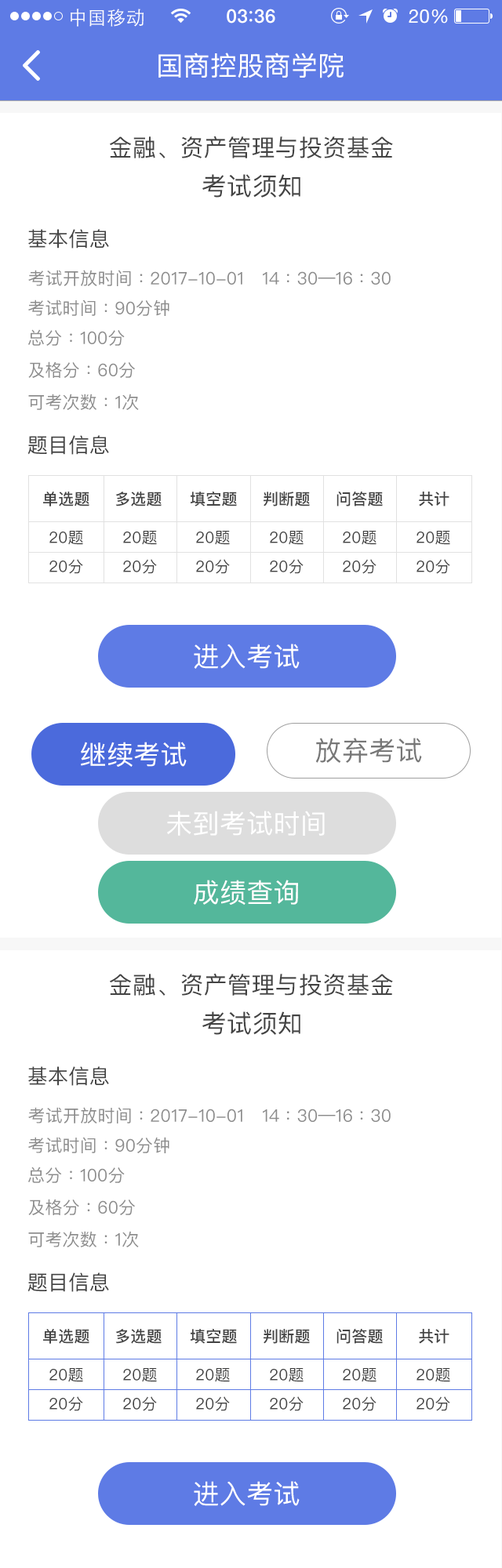
<style>
.page{position:relative;width:502px;height:1568px;background:#ffffff}
.page>*{position:absolute;margin:0}
.t1{font:18.8px "STHeitiSC-Light";letter-spacing:0.02em;color:#ffffff}
.t2{font:18.8px "HelveticaNeue-Medium";letter-spacing:0.03em;color:#ffffff}
.t3{font:18.8px "HelveticaNeue";letter-spacing:0.02em;color:#ffffff}
.t4{font:26.7px "PingFangSC-Regular";letter-spacing:0.01em;color:#ffffff}
.t5{font:23.5px "PingFangSC-Regular";letter-spacing:0.01em;color:#434343}
.t6{font:25.1px "PingFangSC-Regular";letter-spacing:0.01em;color:#434343}
.t7{font:20.4px "PingFangSC-Regular";letter-spacing:0.01em;color:#434343}
.t8{font:17.2px "PingFangSC-Regular";letter-spacing:0.01em;color:#8c8c8c}
.t9{font:15.7px "PingFangSC-Medium";letter-spacing:0.01em;color:#434343}
.t10{font:15.7px "PingFangSC-Regular";letter-spacing:0.01em;color:#434343}
.t11{font:26.7px "PingFangSC-Regular";letter-spacing:0.01em;color:#777777}
</style>
<div class="page">
<p class="t1" style="left:71px;top:9px;width:72px;height:18px">中国移动</p>
<p class="t2" style="left:227px;top:9px;width:48px;height:15px">03 36</p>
<p class="t3" style="left:408px;top:9px;width:40px;height:15px">20%</p>
<p class="t4" style="left:158px;top:53px;width:185px;height:25px">国商控股商学院</p>
<p class="t5" style="left:110px;top:136px;width:283px;height:22px">金融、资产管理与投资基金</p>
<p class="t6" style="left:202px;top:174px;width:98px;height:24px">考试须知</p>
<p class="t7" style="left:28px;top:229px;width:81px;height:20px">基本信息</p>
<p class="t8" style="left:28px;top:270px;width:362px;height:16px">考试开放时间：2017-10-01   14：30—16：30</p>
<p class="t8" style="left:28px;top:299px;width:141px;height:17px">考试时间：90分钟</p>
<p class="t8" style="left:28px;top:329px;width:97px;height:17px">总分：100分</p>
<p class="t8" style="left:28px;top:361px;width:107px;height:17px">及格分：60分</p>
<p class="t8" style="left:28px;top:394px;width:111px;height:16px">可考次数：1次</p>
<p class="t7" style="left:27px;top:435px;width:82px;height:20px">题目信息</p>
<p class="t9" style="left:43px;top:492px;width:46px;height:14px">单选题</p>
<p class="t9" style="left:115px;top:492px;width:47px;height:14px">多选题</p>
<p class="t9" style="left:190px;top:492px;width:47px;height:14px">填空题</p>
<p class="t9" style="left:263px;top:492px;width:47px;height:14px">判断题</p>
<p class="t9" style="left:336px;top:492px;width:47px;height:14px">问答题</p>
<p class="t9" style="left:419px;top:492px;width:30px;height:14px">共计</p>
<p class="t10" style="left:49px;top:531px;width:34px;height:14px">20题</p>
<p class="t10" style="left:123px;top:531px;width:34px;height:14px">20题</p>
<p class="t10" style="left:196px;top:531px;width:34px;height:14px">20题</p>
<p class="t10" style="left:270px;top:531px;width:33px;height:14px">20题</p>
<p class="t10" style="left:343px;top:531px;width:33px;height:14px">20题</p>
<p class="t10" style="left:416px;top:531px;width:34px;height:14px">20题</p>
<p class="t10" style="left:49px;top:559px;width:34px;height:15px">20分</p>
<p class="t10" style="left:123px;top:559px;width:34px;height:15px">20分</p>
<p class="t10" style="left:196px;top:559px;width:34px;height:15px">20分</p>
<p class="t10" style="left:270px;top:559px;width:33px;height:15px">20分</p>
<p class="t10" style="left:343px;top:559px;width:33px;height:15px">20分</p>
<p class="t10" style="left:416px;top:559px;width:34px;height:15px">20分</p>
<p class="t4" style="left:194px;top:644px;width:105px;height:25px">进入考试</p>
<p class="t11" style="left:315px;top:738px;width:107px;height:25px">放弃考试</p>
<p class="t4" style="left:81px;top:742px;width:106px;height:25px">继续考试</p>
<p class="t4" style="left:167px;top:811px;width:158px;height:25px">未到考试时间</p>
<p class="t4" style="left:194px;top:880px;width:104px;height:25px">成绩查询</p>
<p class="t5" style="left:110px;top:973px;width:283px;height:23px">金融、资产管理与投资基金</p>
<p class="t6" style="left:202px;top:1011px;width:98px;height:24px">考试须知</p>
<p class="t7" style="left:28px;top:1066px;width:81px;height:20px">基本信息</p>
<p class="t8" style="left:28px;top:1107px;width:362px;height:16px">考试开放时间：2017-10-01   14：30—16：30</p>
<p class="t8" style="left:28px;top:1137px;width:141px;height:16px">考试时间：90分钟</p>
<p class="t8" style="left:28px;top:1167px;width:97px;height:16px">总分：100分</p>
<p class="t8" style="left:28px;top:1199px;width:107px;height:16px">及格分：60分</p>
<p class="t8" style="left:28px;top:1231px;width:111px;height:16px">可考次数：1次</p>
<p class="t7" style="left:27px;top:1272px;width:82px;height:20px">题目信息</p>
<p class="t9" style="left:43px;top:1329px;width:46px;height:15px">单选题</p>
<p class="t9" style="left:115px;top:1329px;width:47px;height:15px">多选题</p>
<p class="t9" style="left:190px;top:1329px;width:47px;height:15px">填空题</p>
<p class="t9" style="left:263px;top:1329px;width:47px;height:15px">判断题</p>
<p class="t9" style="left:336px;top:1329px;width:47px;height:15px">问答题</p>
<p class="t9" style="left:419px;top:1329px;width:30px;height:15px">共计</p>
<p class="t10" style="left:49px;top:1368px;width:34px;height:14px">20题</p>
<p class="t10" style="left:123px;top:1368px;width:34px;height:14px">20题</p>
<p class="t10" style="left:196px;top:1368px;width:34px;height:14px">20题</p>
<p class="t10" style="left:270px;top:1368px;width:33px;height:14px">20题</p>
<p class="t10" style="left:343px;top:1368px;width:33px;height:14px">20题</p>
<p class="t10" style="left:416px;top:1368px;width:34px;height:14px">20题</p>
<p class="t10" style="left:49px;top:1396px;width:34px;height:15px">20分</p>
<p class="t10" style="left:123px;top:1396px;width:34px;height:15px">20分</p>
<p class="t10" style="left:196px;top:1396px;width:34px;height:15px">20分</p>
<p class="t10" style="left:270px;top:1396px;width:33px;height:15px">20分</p>
<p class="t10" style="left:343px;top:1396px;width:33px;height:15px">20分</p>
<p class="t10" style="left:416px;top:1396px;width:34px;height:15px">20分</p>
<p class="t4" style="left:194px;top:1481px;width:105px;height:25px">进入考试</p>
</div>
